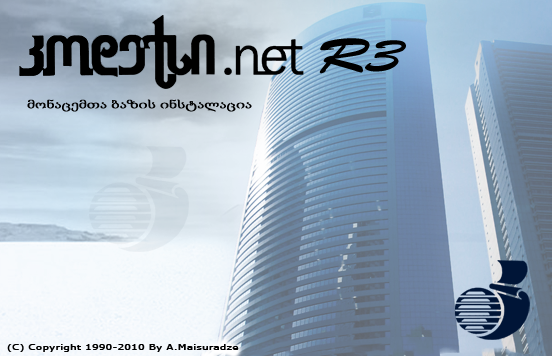
<style>
.page{position:relative;width:552px;height:356px}
.page>*{position:absolute;margin:0}
.t1{font:48px "BrushScriptStd";letter-spacing:0.005em;color:#000000;scale:1.28 1}
.t2{font:12px "Sylfaen";letter-spacing:0.005em;color:#000000;font-weight:bold;scale:1.28 1}
.t3{font:8px "MSReferenceSansSerif";letter-spacing:0.005em;color:#000000;font-weight:bold;scale:1.28 1}
</style>
<div class="page">
<p class="t1" style="left:319px;top:38px;width:87px;height:36px">R3</p>
<p class="t2" style="left:27px;top:99px;width:225px;height:13px">მონაცემთა ბაზის ინსტალაცია</p>
<p class="t3" style="left:7px;top:344px;width:232px;height:8px">(C) Copyright 1990-2010 By A.Maisuradze</p>
</div>
